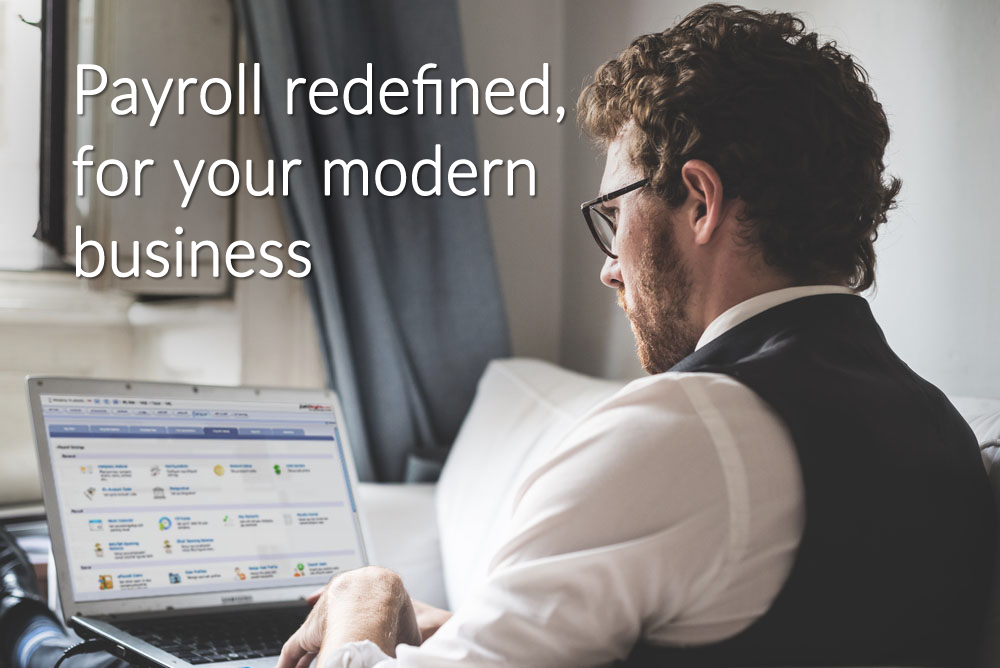
<style>
.page{position:relative;width:1000px;height:668px}
.page>*{position:absolute;margin:0}
.t1{font:67.7px "Lato-Light";letter-spacing:-0.01em;color:#ffffff;font-weight:bold;scale:0.94 1}
</style>
<div class="page">
<p class="t1" style="left:72px;top:63px;width:493px;height:215px">Payroll redefined,<br>for your modern<br>business</p>
</div>
